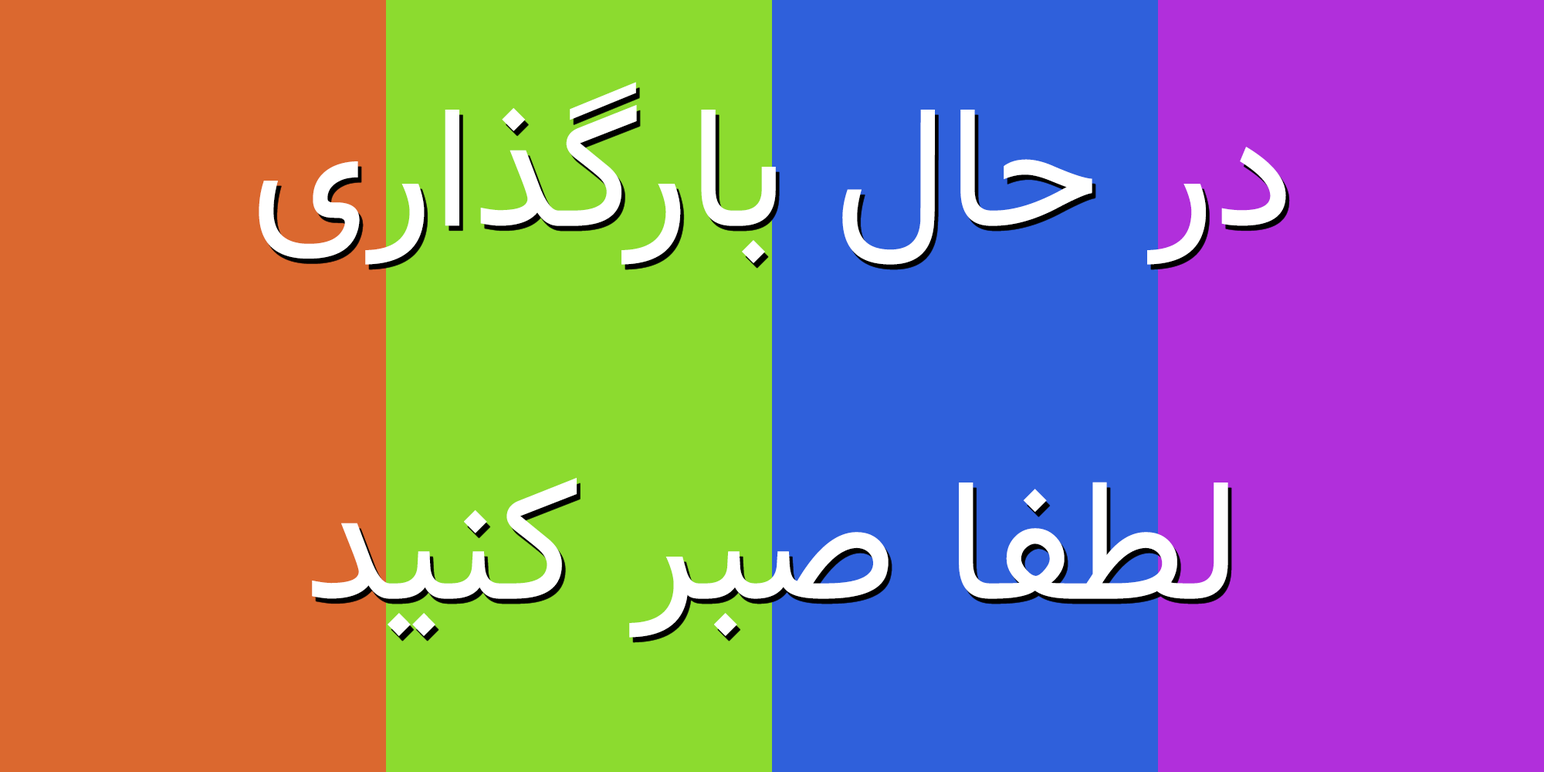
<style>
.page{position:relative;width:1544px;height:772px;background:#db682f}
.page>*{position:absolute;margin:0}
.t1{font:167.6px "Dirooz";color:#ffffff}
</style>
<div class="page">
<p class="t1" style="left:259px;top:82px;width:1027px;height:183px">در حال بارگذاری</p>
<p class="t1" style="left:312px;top:478px;width:916px;height:160px">لطفا صبر کنید</p>
</div>
